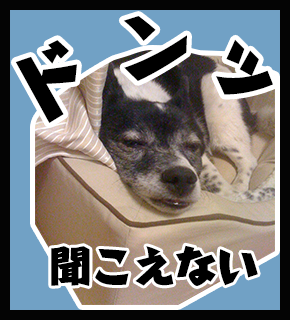
<style>
.page{position:relative;width:290px;height:320px;background:#71a1c5}
.page>*{position:absolute;margin:0}
.t1{font:74.2px "HarucraftStd-Heavy";color:#000000}
.t2{font:41.9px "HarucraftStd-Heavy";color:#000000}
</style>
<div class="page">
<p class="t1" style="left:123px;top:16px;width:64px;height:65px">ン</p>
<p class="t1" style="left:15px;top:40px;width:62px;height:83px;rotate:-29deg">ド</p>
<p class="t1" style="left:216px;top:39px;width:57px;height:56px;rotate:48deg">ッ</p>
<p class="t2" style="left:51px;top:245px;width:207px;height:41px">聞こえない</p>
</div>
